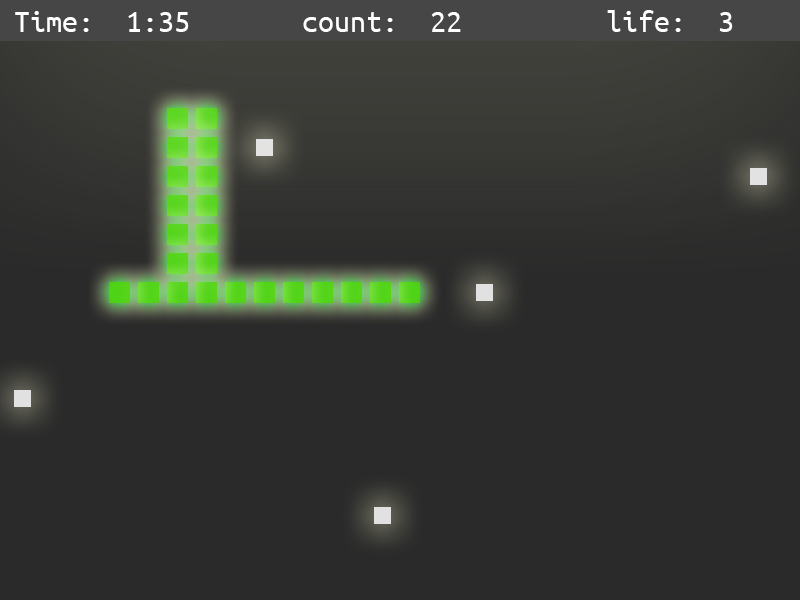
<style>
.page{position:relative;width:800px;height:600px;background:#2a2a2a}
.page>*{position:absolute;margin:0}
.t1{font:32px "UbuntuMono-Regular";color:#ffffff}
</style>
<div class="page">
<p class="t1" style="left:15px;top:10px;width:718px;height:22px">Time:  1:35       count:  22         life:  3</p>
</div>
